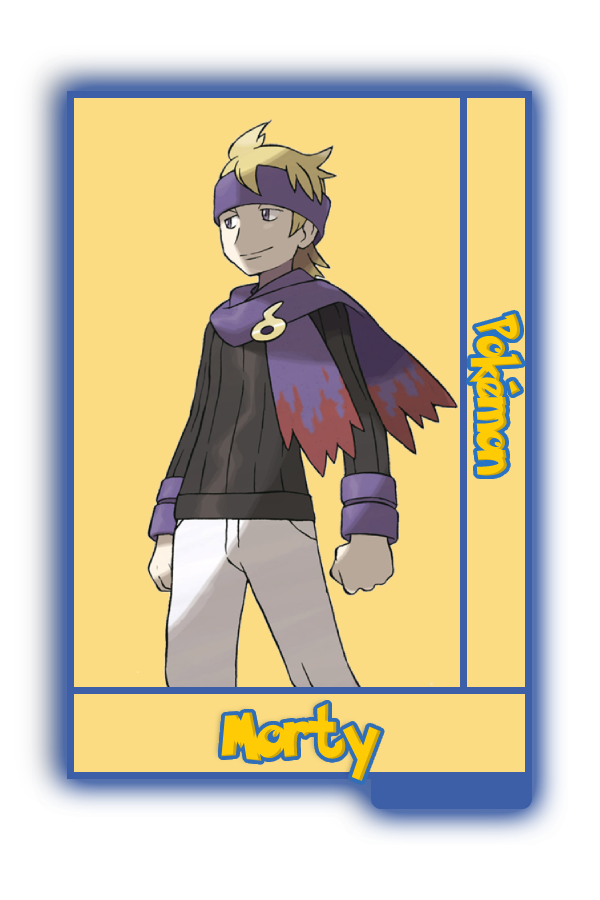
<style>
.page{position:relative;width:600px;height:900px;background:#fbdc83}
.page>*{position:absolute;margin:0}
.t1{font:48.8px "PokemonSolidNormal";color:#ffcb05;scale:0.8 1}
.t2{font:56.6px "PokemonSolidNormal";color:#ffcb05;scale:0.92 1}
</style>
<div class="page">
<p class="t1" style="left:469px;top:313px;width:54px;height:163px;rotate:90deg">Pokémon</p>
<p class="t2" style="left:221px;top:703px;width:160px;height:78px">Morty</p>
</div>
